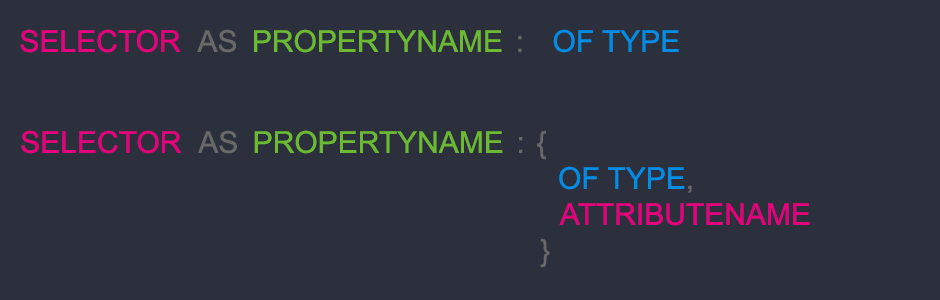
<style>
.page{position:relative;width:940px;height:300px;background:#2c303c}
.page>*{position:absolute;margin:0}
.t1{font:30px "ArialMT";color:#6cba32}
.t2{font:30px "ArialMT";color:#e6007e}
.t3{font:30px "ArialMT";color:#696969}
.t4{font:30px "ArialMT";color:#008de6}
</style>
<div class="page">
<p class="t1" style="left:20px;top:29px;width:659px;height:24px"><span class="t2">SELECTOR </span><span class="t3">AS </span>PROPERTYNAME <span class="t3">:   </span><span class="t4">OF TYPE</span></p>
<p class="t2" style="left:21px;top:130px;width:789px;height:138px;text-align:center">SELECTOR <span class="t3">AS </span><span class="t1">PROPERTYNAME </span><span class="t3">: {<br>                                                                                  </span><span class="t4">OF TYPE</span><span class="t3">,<br>                                                                                                 </span>ATTRIBUTENAME<br>               <span class="t3">}</span></p>
</div>
